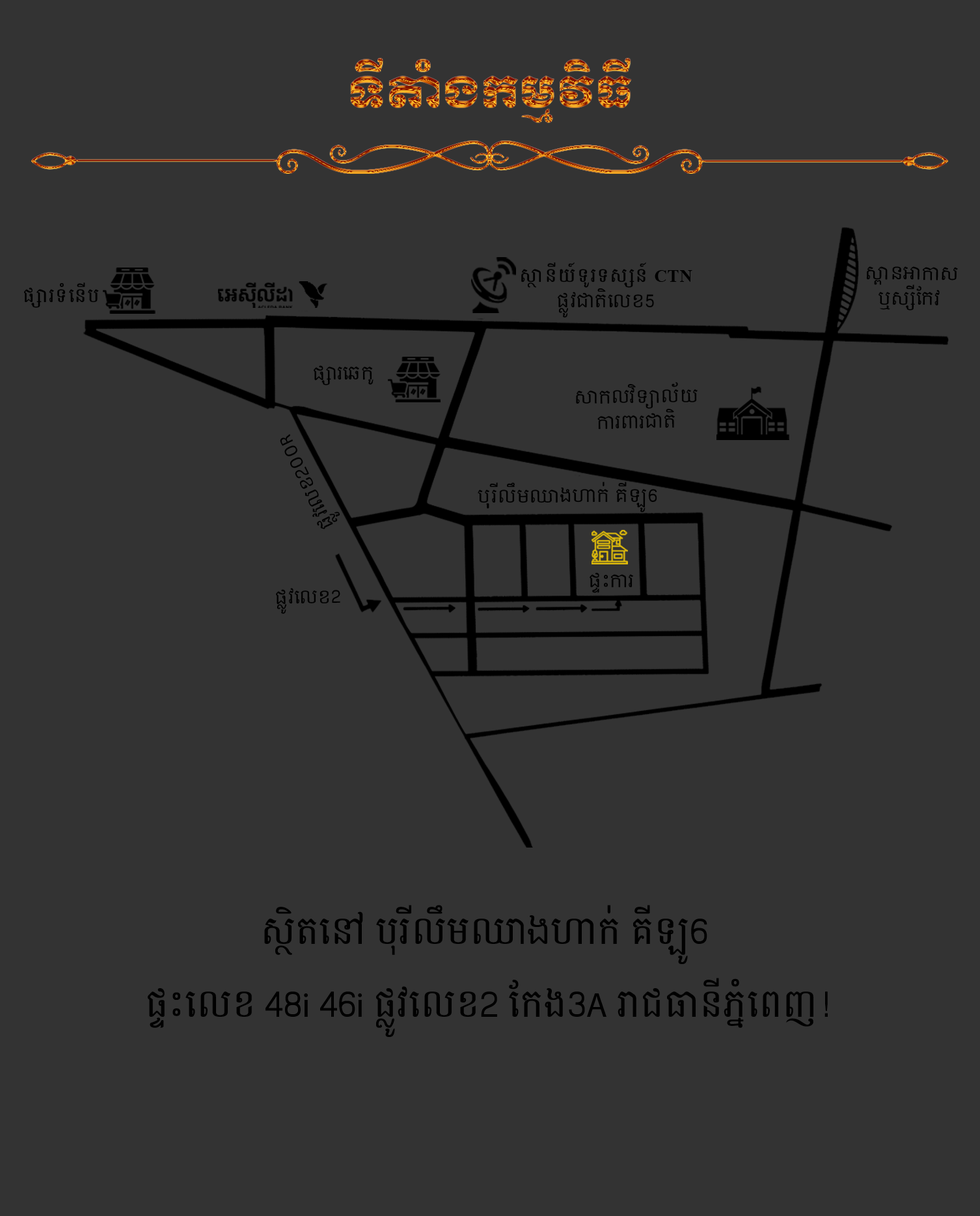
<style>
.page{position:relative;width:980px;height:1216px;background:#333333}
.page>*{position:absolute;margin:0}
.t1{font:17.3px/25.2px "KhBattambang";letter-spacing:0.04em;color:#000000}
.t2{font:17.3px/25.2px "KhmerViravuth";letter-spacing:0.04em;color:#000000}
.t3{font:17.3px/25.2px "KhmerOSContent";letter-spacing:0.04em;color:#000000}
.t4{font:17.3px/25.2px "MyriadPro-Regular";letter-spacing:0.04em;color:#000000}
.t5{font:17.3px "KhBattambang";letter-spacing:0.04em;color:#000000}
.t6{font:17.3px "KhmerOSContent";letter-spacing:0.04em;color:#000000}
.t7{font:17.3px "MyriadPro-Regular";letter-spacing:0.04em;color:#000000}
.t8{font:34.5px/4.9px "KhBattambang";color:#000000}
.t9{font:34.5px/4.9px "KhmerOSContent";color:#000000}
.t10{font:34.5px/4.9px "MyriadPro-Regular";color:#000000}
</style>
<div class="page">
<p class="t1" style="left:521px;top:262px;width:172px;height:56px;text-align:center">ស្ថានីយ៍ទូរទស្សន៍ <span class="t2">CTN<br></span><span class="t3">ផ្លូវជាតិលេខ5</span></p>
<p class="t3" style="left:867px;top:266px;width:91px;height:45px;text-align:center;rotate:1deg"><span class="t4"> </span>ស្ពានអាកាស<br>ឬស្សីកែវ</p>
<p class="t5" style="left:24px;top:283px;width:75px;height:25px">ផ្សារទំនើប</p>
<p class="t6" style="left:314px;top:365px;width:60px;height:20px;rotate:-1deg">ផ្សារឆេកូ</p>
<p class="t3" style="left:576px;top:382px;width:122px;height:48px;text-align:center;rotate:-1deg">សាកលវិទ្យាល័យ<br>ការពារជាតិ</p>
<p class="t6" style="left:280px;top:434px;width:61px;height:95px;rotate:-116deg">ផ្លូវលេខ2០០<span class="t7">R</span></p>
<p class="t3" style="left:478px;top:482px;width:180px;height:30px;text-align:center">បុុរីលឹមឈាងហាក់ គីឡូ6</p>
<p class="t6" style="left:590px;top:572px;width:43px;height:21px">ផ្ទះការ</p>
<p class="t6" style="left:276px;top:588px;width:65px;height:26px;rotate:-1deg">ផ្លូវលេខ2</p>
<p class="t8" style="left:148px;top:905px;width:680px;height:132px;text-align:center">ស្ថិតនៅ បុរីលឹមឈ<span class="t9">ាង</span>ហាក់ គីឡូ6 <br><br><br><br><br><br><br><br><br><br><br><br><br><br><br>ផ្ទះលេខ 48<span class="t10">i</span> 46<span class="t10">i</span> ផ្លូវលេខ2 កែង3<span class="t10">A</span> រាជធានីភ្នំពេញ!</p>
</div>
